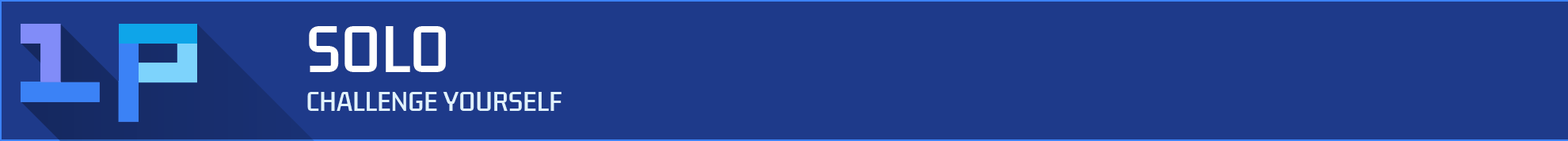
<style>
.page{position:relative;width:1568px;height:141px;background:#1e3a8a}
.page>*{position:absolute;margin:0}
.t1{font:57px "KdamThmorPro-Regular";color:#ffffff}
.t2{font:23.8px "KdamThmorPro-Regular";color:#e0f2fe}
</style>
<div class="page">
<p class="t1" style="left:309px;top:26px;width:137px;height:46px">SOLO</p>
<p class="t2" style="left:307px;top:92px;width:254px;height:19px">CHALLENGE YOURSELF</p>
</div>
